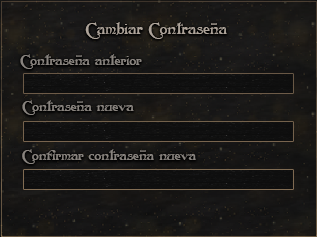
<style>
.page{position:relative;width:317px;height:237px}
.page>*{position:absolute;margin:0}
.t1{font:15.7px "Folkard";color:#aea49a}
.t2{font:7.8px "Folkard"}
.t3{font:13.9px "Folkard";color:#88837e}
</style>
<div class="page">
<p class="t1" style="left:85px;top:22px;width:142px;height:17px">Cambiar Contrasena</p>
<p class="t2" style="left:211px;top:23px;width:6px;height:2px;rotate:90deg">l</p>
<p class="t3" style="left:20px;top:54px;width:122px;height:15px">Contrasena anterior</p>
<p class="t2" style="left:76px;top:55px;width:6px;height:2px;rotate:90deg">l</p>
<p class="t3" style="left:22px;top:100px;width:112px;height:15px">Contrasena nueva</p>
<p class="t2" style="left:77px;top:101px;width:6px;height:2px;rotate:90deg">l</p>
<p class="t3" style="left:22px;top:149px;width:174px;height:15px">Confirmar contrasena nueva</p>
<p class="t2" style="left:140px;top:150px;width:6px;height:2px;rotate:90deg">l</p>
</div>
